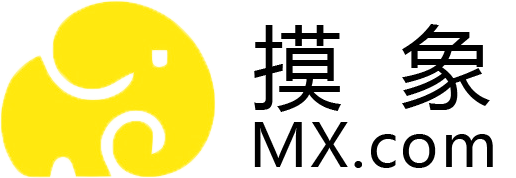
<style>
.page{position:relative;width:516px;height:178px;background:#ffffff}
.page>*{position:absolute;margin:0}
.t1{font:90px "MicrosoftYaHei";letter-spacing:0.64em;color:#000000}
.t2{font:60px "MicrosoftYaHei";letter-spacing:0.04em;color:#000000}
</style>
<div class="page">
<p class="t1" style="left:254px;top:24px;width:236px;height:88px">摸象</p>
<p class="t2" style="left:254px;top:122px;width:239px;height:46px">MX.com</p>
</div>
